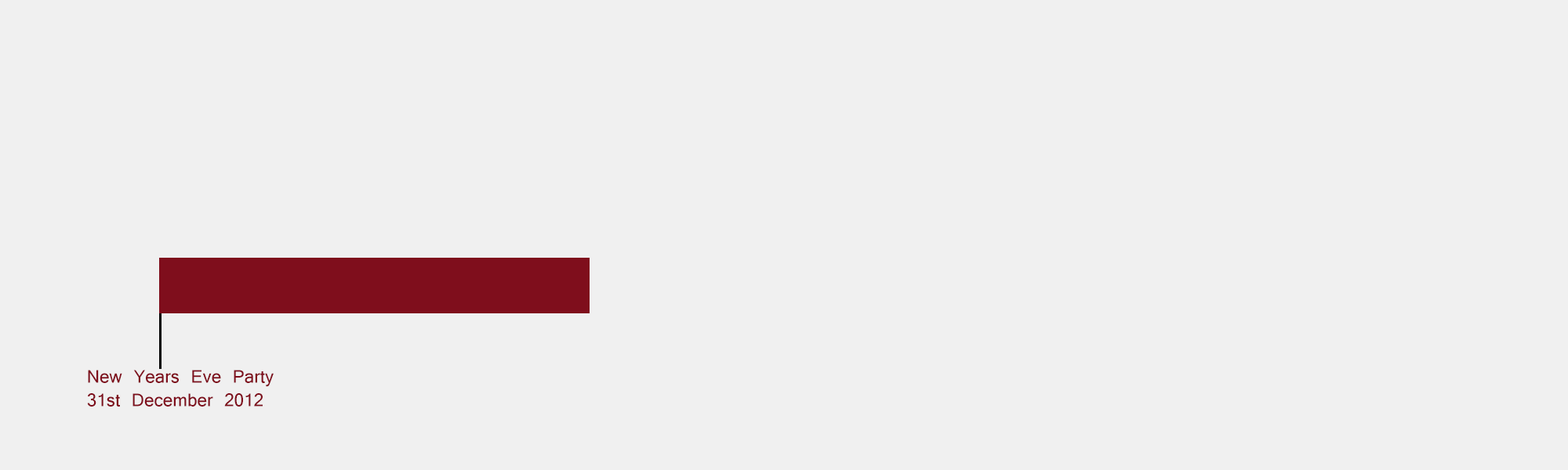
<style>
.page{position:relative;width:1568px;height:470px;background:#f0f0f0}
.page>*{position:absolute;margin:0}
.t1{font:19.6px "Latha";color:#7f0e1c}
</style>
<div class="page">
<p class="t1" style="left:87px;top:370px;width:187px;height:37px">New Years Eve Party<br>31st December 2012</p>
</div>
